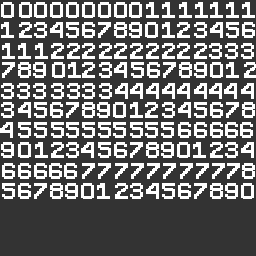
<style>
.page{position:relative;width:256px;height:256px;background:#333333}
.page>*{position:absolute;margin:0}
.t1{font:32px "Pixeboy";color:#ffffff}
</style>
<div class="page">
<p class="t1" style="left:1px;top:2px;width:13px;height:16px">0</p>
<p class="t1" style="left:19px;top:2px;width:13px;height:16px">0</p>
<p class="t1" style="left:34px;top:2px;width:13px;height:16px">0</p>
<p class="t1" style="left:50px;top:2px;width:13px;height:16px">0</p>
<p class="t1" style="left:66px;top:2px;width:13px;height:16px">0</p>
<p class="t1" style="left:82px;top:2px;width:13px;height:16px">0</p>
<p class="t1" style="left:98px;top:2px;width:13px;height:16px">0</p>
<p class="t1" style="left:114px;top:2px;width:13px;height:16px">0</p>
<p class="t1" style="left:129px;top:2px;width:13px;height:16px">0</p>
<p class="t1" style="left:146px;top:2px;width:13px;height:16px">1</p>
<p class="t1" style="left:162px;top:2px;width:13px;height:16px">1</p>
<p class="t1" style="left:179px;top:2px;width:13px;height:16px">1</p>
<p class="t1" style="left:195px;top:2px;width:13px;height:16px">1</p>
<p class="t1" style="left:210px;top:2px;width:13px;height:16px">1</p>
<p class="t1" style="left:226px;top:2px;width:13px;height:16px">1</p>
<p class="t1" style="left:242px;top:2px;width:13px;height:16px">1</p>
<p class="t1" style="left:1px;top:22px;width:13px;height:16px">1</p>
<p class="t1" style="left:19px;top:22px;width:13px;height:16px">2</p>
<p class="t1" style="left:34px;top:22px;width:13px;height:16px">3</p>
<p class="t1" style="left:50px;top:22px;width:13px;height:16px">4</p>
<p class="t1" style="left:66px;top:22px;width:13px;height:16px">5</p>
<p class="t1" style="left:82px;top:22px;width:13px;height:16px">6</p>
<p class="t1" style="left:98px;top:22px;width:13px;height:16px">7</p>
<p class="t1" style="left:114px;top:22px;width:13px;height:16px">8</p>
<p class="t1" style="left:129px;top:22px;width:13px;height:16px">9</p>
<p class="t1" style="left:145px;top:22px;width:13px;height:16px">0</p>
<p class="t1" style="left:162px;top:22px;width:13px;height:16px">1</p>
<p class="t1" style="left:177px;top:22px;width:13px;height:16px">2</p>
<p class="t1" style="left:194px;top:22px;width:13px;height:16px">3</p>
<p class="t1" style="left:210px;top:22px;width:13px;height:16px">4</p>
<p class="t1" style="left:226px;top:22px;width:13px;height:16px">5</p>
<p class="t1" style="left:242px;top:22px;width:13px;height:16px">6</p>
<p class="t1" style="left:2px;top:43px;width:13px;height:16px">1</p>
<p class="t1" style="left:18px;top:43px;width:13px;height:16px">1</p>
<p class="t1" style="left:35px;top:43px;width:13px;height:16px">1</p>
<p class="t1" style="left:51px;top:43px;width:13px;height:16px">2</p>
<p class="t1" style="left:67px;top:43px;width:13px;height:16px">2</p>
<p class="t1" style="left:82px;top:43px;width:13px;height:16px">2</p>
<p class="t1" style="left:99px;top:43px;width:13px;height:16px">2</p>
<p class="t1" style="left:114px;top:43px;width:13px;height:16px">2</p>
<p class="t1" style="left:130px;top:43px;width:13px;height:16px">2</p>
<p class="t1" style="left:146px;top:43px;width:13px;height:16px">2</p>
<p class="t1" style="left:162px;top:43px;width:13px;height:16px">2</p>
<p class="t1" style="left:177px;top:43px;width:13px;height:16px">2</p>
<p class="t1" style="left:194px;top:43px;width:13px;height:16px">2</p>
<p class="t1" style="left:209px;top:43px;width:13px;height:16px">3</p>
<p class="t1" style="left:225px;top:43px;width:13px;height:16px">3</p>
<p class="t1" style="left:241px;top:43px;width:13px;height:16px">3</p>
<p class="t1" style="left:2px;top:62px;width:13px;height:16px">7</p>
<p class="t1" style="left:18px;top:62px;width:13px;height:16px">8</p>
<p class="t1" style="left:33px;top:62px;width:13px;height:16px">9</p>
<p class="t1" style="left:52px;top:62px;width:13px;height:16px">0</p>
<p class="t1" style="left:68px;top:62px;width:13px;height:16px">1</p>
<p class="t1" style="left:82px;top:62px;width:13px;height:16px">2</p>
<p class="t1" style="left:99px;top:62px;width:13px;height:16px">3</p>
<p class="t1" style="left:114px;top:62px;width:13px;height:16px">4</p>
<p class="t1" style="left:131px;top:62px;width:13px;height:16px">5</p>
<p class="t1" style="left:147px;top:62px;width:13px;height:16px">6</p>
<p class="t1" style="left:163px;top:62px;width:13px;height:16px">7</p>
<p class="t1" style="left:179px;top:62px;width:13px;height:16px">8</p>
<p class="t1" style="left:194px;top:62px;width:13px;height:16px">9</p>
<p class="t1" style="left:210px;top:62px;width:13px;height:16px">0</p>
<p class="t1" style="left:226px;top:62px;width:13px;height:16px">1</p>
<p class="t1" style="left:244px;top:62px;width:13px;height:16px">2</p>
<p class="t1" style="left:1px;top:83px;width:13px;height:16px">3</p>
<p class="t1" style="left:17px;top:83px;width:13px;height:16px">3</p>
<p class="t1" style="left:33px;top:83px;width:13px;height:16px">3</p>
<p class="t1" style="left:51px;top:83px;width:13px;height:16px">3</p>
<p class="t1" style="left:67px;top:83px;width:13px;height:16px">3</p>
<p class="t1" style="left:82px;top:83px;width:13px;height:16px">3</p>
<p class="t1" style="left:99px;top:83px;width:13px;height:16px">3</p>
<p class="t1" style="left:115px;top:83px;width:13px;height:16px">4</p>
<p class="t1" style="left:130px;top:83px;width:13px;height:16px">4</p>
<p class="t1" style="left:146px;top:83px;width:13px;height:16px">4</p>
<p class="t1" style="left:162px;top:83px;width:13px;height:16px">4</p>
<p class="t1" style="left:177px;top:83px;width:13px;height:16px">4</p>
<p class="t1" style="left:194px;top:83px;width:13px;height:16px">4</p>
<p class="t1" style="left:209px;top:83px;width:13px;height:16px">4</p>
<p class="t1" style="left:224px;top:83px;width:13px;height:16px">4</p>
<p class="t1" style="left:241px;top:83px;width:13px;height:16px">4</p>
<p class="t1" style="left:1px;top:102px;width:13px;height:16px">3</p>
<p class="t1" style="left:18px;top:102px;width:13px;height:16px">4</p>
<p class="t1" style="left:34px;top:102px;width:13px;height:16px">5</p>
<p class="t1" style="left:50px;top:102px;width:13px;height:16px">6</p>
<p class="t1" style="left:66px;top:102px;width:13px;height:16px">7</p>
<p class="t1" style="left:82px;top:102px;width:13px;height:16px">8</p>
<p class="t1" style="left:97px;top:102px;width:13px;height:16px">9</p>
<p class="t1" style="left:113px;top:102px;width:13px;height:16px">0</p>
<p class="t1" style="left:130px;top:102px;width:13px;height:16px">1</p>
<p class="t1" style="left:145px;top:102px;width:13px;height:16px">2</p>
<p class="t1" style="left:162px;top:102px;width:13px;height:16px">3</p>
<p class="t1" style="left:178px;top:102px;width:13px;height:16px">4</p>
<p class="t1" style="left:194px;top:102px;width:13px;height:16px">5</p>
<p class="t1" style="left:210px;top:102px;width:13px;height:16px">6</p>
<p class="t1" style="left:226px;top:102px;width:13px;height:16px">7</p>
<p class="t1" style="left:242px;top:102px;width:13px;height:16px">8</p>
<p class="t1" style="left:0px;top:122px;width:13px;height:16px">4</p>
<p class="t1" style="left:18px;top:122px;width:13px;height:16px">5</p>
<p class="t1" style="left:34px;top:122px;width:13px;height:16px">5</p>
<p class="t1" style="left:51px;top:122px;width:13px;height:16px">5</p>
<p class="t1" style="left:66px;top:122px;width:13px;height:16px">5</p>
<p class="t1" style="left:82px;top:122px;width:13px;height:16px">5</p>
<p class="t1" style="left:98px;top:122px;width:13px;height:16px">5</p>
<p class="t1" style="left:113px;top:122px;width:13px;height:16px">5</p>
<p class="t1" style="left:130px;top:122px;width:13px;height:16px">5</p>
<p class="t1" style="left:145px;top:122px;width:13px;height:16px">5</p>
<p class="t1" style="left:161px;top:122px;width:13px;height:16px">5</p>
<p class="t1" style="left:178px;top:122px;width:13px;height:16px">6</p>
<p class="t1" style="left:194px;top:122px;width:13px;height:16px">6</p>
<p class="t1" style="left:210px;top:122px;width:13px;height:16px">6</p>
<p class="t1" style="left:225px;top:122px;width:13px;height:16px">6</p>
<p class="t1" style="left:240px;top:122px;width:13px;height:16px">6</p>
<p class="t1" style="left:1px;top:142px;width:13px;height:16px">9</p>
<p class="t1" style="left:18px;top:142px;width:13px;height:16px">0</p>
<p class="t1" style="left:35px;top:142px;width:13px;height:16px">1</p>
<p class="t1" style="left:51px;top:142px;width:13px;height:16px">2</p>
<p class="t1" style="left:66px;top:142px;width:13px;height:16px">3</p>
<p class="t1" style="left:81px;top:142px;width:13px;height:16px">4</p>
<p class="t1" style="left:98px;top:142px;width:13px;height:16px">5</p>
<p class="t1" style="left:114px;top:142px;width:13px;height:16px">6</p>
<p class="t1" style="left:130px;top:142px;width:13px;height:16px">7</p>
<p class="t1" style="left:146px;top:142px;width:13px;height:16px">8</p>
<p class="t1" style="left:161px;top:142px;width:13px;height:16px">9</p>
<p class="t1" style="left:177px;top:142px;width:13px;height:16px">0</p>
<p class="t1" style="left:193px;top:142px;width:13px;height:16px">1</p>
<p class="t1" style="left:210px;top:142px;width:13px;height:16px">2</p>
<p class="t1" style="left:225px;top:142px;width:13px;height:16px">3</p>
<p class="t1" style="left:241px;top:142px;width:13px;height:16px">4</p>
<p class="t1" style="left:2px;top:163px;width:13px;height:16px">6</p>
<p class="t1" style="left:18px;top:163px;width:13px;height:16px">6</p>
<p class="t1" style="left:34px;top:163px;width:13px;height:16px">6</p>
<p class="t1" style="left:49px;top:163px;width:13px;height:16px">6</p>
<p class="t1" style="left:64px;top:163px;width:13px;height:16px">6</p>
<p class="t1" style="left:82px;top:163px;width:13px;height:16px">7</p>
<p class="t1" style="left:98px;top:163px;width:13px;height:16px">7</p>
<p class="t1" style="left:115px;top:163px;width:13px;height:16px">7</p>
<p class="t1" style="left:131px;top:163px;width:13px;height:16px">7</p>
<p class="t1" style="left:147px;top:163px;width:13px;height:16px">7</p>
<p class="t1" style="left:163px;top:163px;width:13px;height:16px">7</p>
<p class="t1" style="left:180px;top:163px;width:13px;height:16px">7</p>
<p class="t1" style="left:196px;top:163px;width:13px;height:16px">7</p>
<p class="t1" style="left:212px;top:163px;width:13px;height:16px">7</p>
<p class="t1" style="left:227px;top:163px;width:13px;height:16px">7</p>
<p class="t1" style="left:242px;top:163px;width:13px;height:16px">8</p>
<p class="t1" style="left:2px;top:183px;width:13px;height:16px">5</p>
<p class="t1" style="left:18px;top:183px;width:13px;height:16px">6</p>
<p class="t1" style="left:34px;top:183px;width:13px;height:16px">7</p>
<p class="t1" style="left:50px;top:183px;width:13px;height:16px">8</p>
<p class="t1" style="left:65px;top:183px;width:13px;height:16px">9</p>
<p class="t1" style="left:81px;top:183px;width:13px;height:16px">0</p>
<p class="t1" style="left:97px;top:183px;width:13px;height:16px">1</p>
<p class="t1" style="left:115px;top:183px;width:13px;height:16px">2</p>
<p class="t1" style="left:130px;top:183px;width:13px;height:16px">3</p>
<p class="t1" style="left:146px;top:183px;width:13px;height:16px">4</p>
<p class="t1" style="left:162px;top:183px;width:13px;height:16px">5</p>
<p class="t1" style="left:178px;top:183px;width:13px;height:16px">6</p>
<p class="t1" style="left:194px;top:183px;width:13px;height:16px">7</p>
<p class="t1" style="left:210px;top:183px;width:13px;height:16px">8</p>
<p class="t1" style="left:225px;top:183px;width:13px;height:16px">9</p>
<p class="t1" style="left:241px;top:183px;width:13px;height:16px">0</p>
</div>
